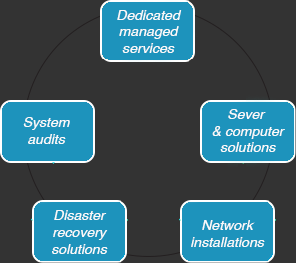
<style>
.page{position:relative;width:296px;height:263px;background:#333333}
.page>*{position:absolute;margin:0}
.t1{font:14px "Helvetica-Oblique";color:#fafafa}
</style>
<div class="page">
<p class="t1" style="left:117px;top:10px;width:65px;height:43px;text-align:center">Dedicated<br>managed<br>services</p>
<p class="t1" style="left:212px;top:109px;width:73px;height:43px;text-align:center">Sever <br>&amp; computer<br>solutions</p>
<p class="t1" style="left:23px;top:117px;width:47px;height:27px;text-align:center">System<br>audits</p>
<p class="t1" style="left:52px;top:210px;width:56px;height:44px;text-align:center">Disaster<br>recovery<br>solutions</p>
<p class="t1" style="left:191px;top:220px;width:74px;height:27px;text-align:center">Network<br>installations</p>
</div>
